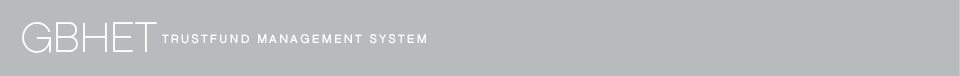
<style>
.page{position:relative;width:960px;height:76px;background:#b7bbbd}
.page>*{position:absolute;margin:0}
.t1{font:42.4px "Chalet-ParisNineteenEighty";color:#ffffff}
.t2{font:12px "Chalet-LondonNineteenEighty";letter-spacing:0.2em;color:#ffffff;text-transform:uppercase}
</style>
<div class="page">
<p class="t1" style="left:22px;top:22px;width:135px;height:31px">GBHET</p>
<p class="t2" style="left:162px;top:34px;width:264px;height:10px">TrustFund Management System</p>
</div>
